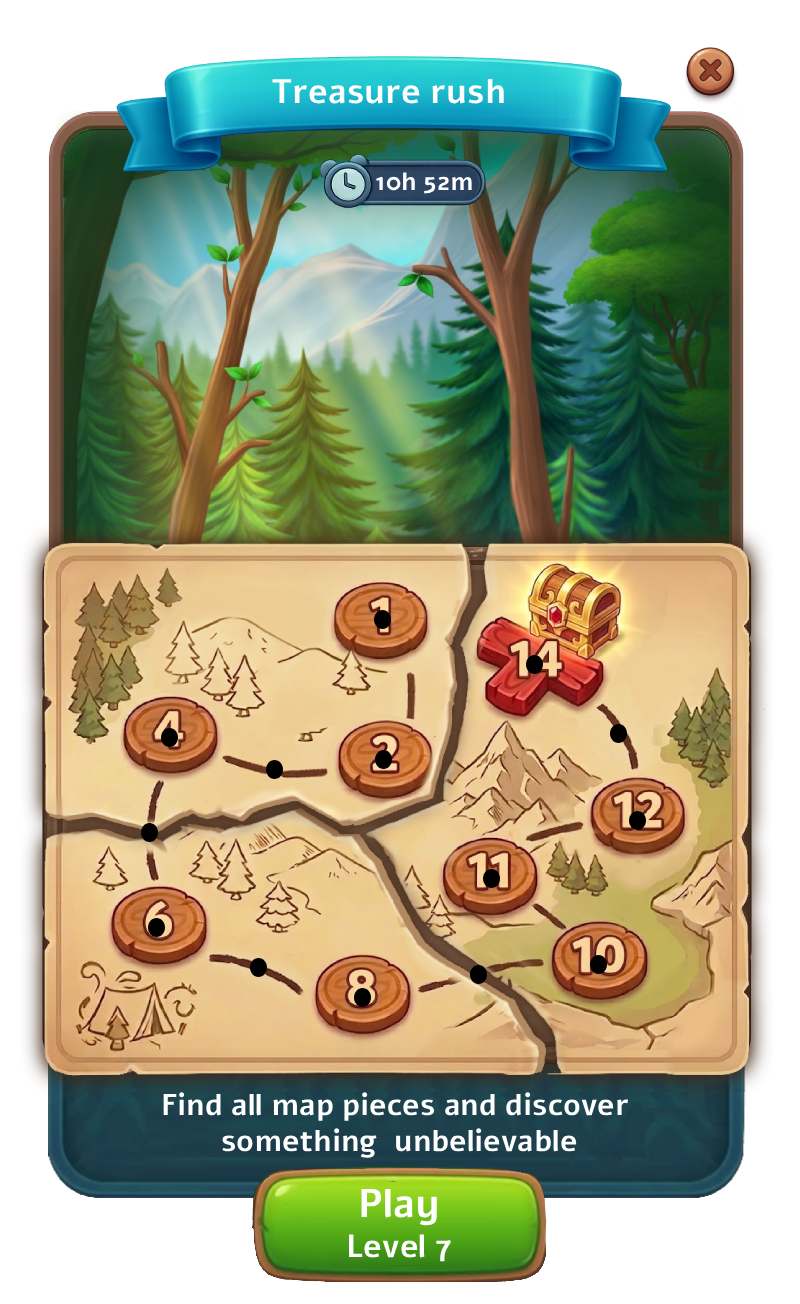
<style>
.page{position:relative;width:800px;height:1304px}
.page>*{position:absolute;margin:0}
.t1{font:34px "Alef-Bold";color:#ffffff}
.t2{font:25px "Alef-Bold";color:#ffffff}
.t3{font:30px "Alef-Bold";color:#ffffff}
.t4{font:40px "Alef-Bold";color:#ffffff}
.t5{font:32px "Alef-Bold";color:#ffffff}
</style>
<div class="page">
<p class="t1" style="left:272px;top:79px;width:232px;height:25px">Treasure rush</p>
<p class="t2" style="left:376px;top:172px;width:96px;height:22px">10h 52m</p>
<p class="t3" style="left:163px;top:1092px;width:466px;height:66px;text-align:center">Find all map pieces and discover <br>something  unbelievable</p>
<p class="t4" style="left:361px;top:1188px;width:76px;height:38px">Play</p>
<p class="t5" style="left:349px;top:1234px;width:102px;height:28px">Level 7</p>
</div>
